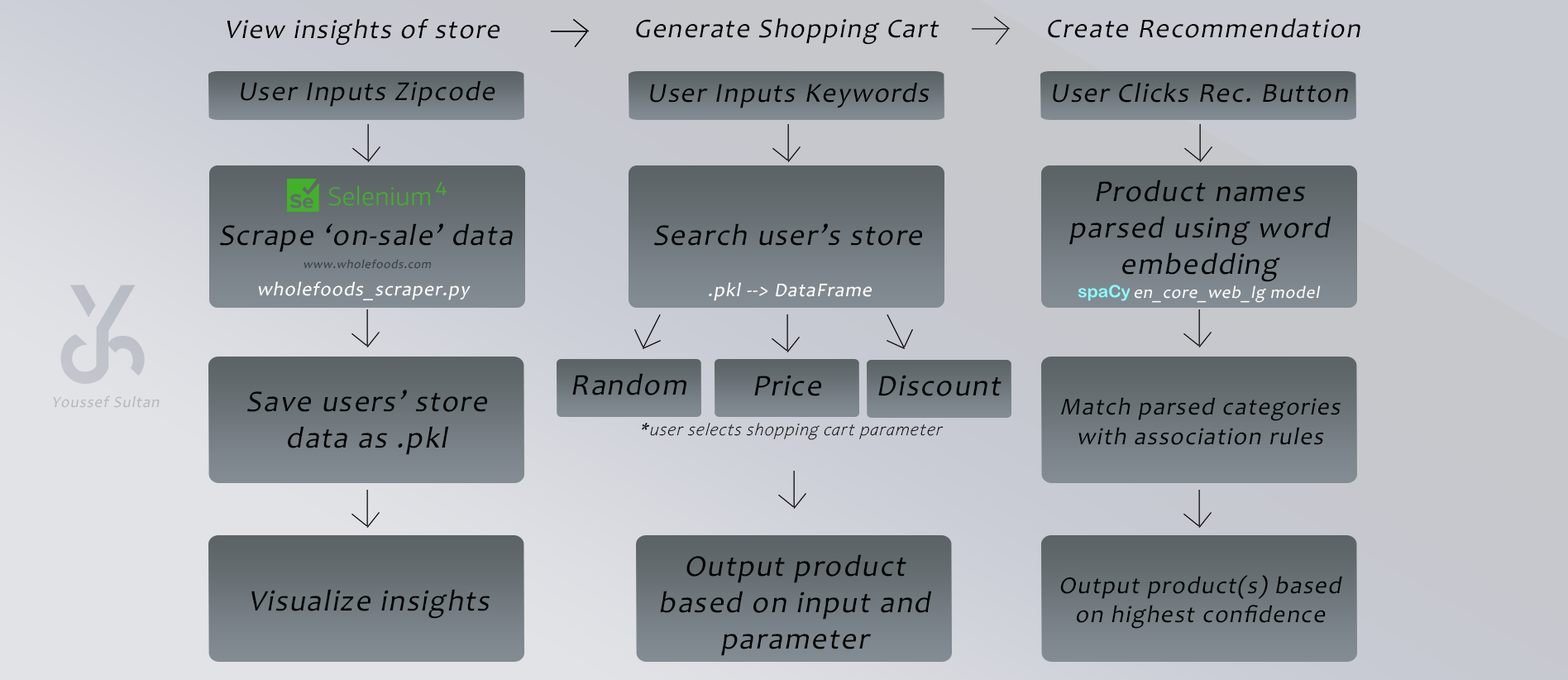
<style>
.page{position:relative;width:1568px;height:680px}
.page>*{position:absolute;margin:0}
.t1{font:27.2px "Candara";letter-spacing:0.05em;color:#000000;font-style:italic}
.t2{font:27.5px "Candara";letter-spacing:0.05em;color:#000000;font-style:italic}
.t3{font:30.4px "Candara";letter-spacing:0.05em;color:#000000;font-style:italic}
.t4{font:12.2px "Candara";letter-spacing:0.05em;color:#394147;font-style:italic}
.t5{font:19.4px "Candara";letter-spacing:0.05em;color:#ffffff;font-style:italic}
.t6{font:17.1px "Candara";letter-spacing:0.05em;color:#ffffff;font-style:italic}
.t7{font:15.8px "Candara";letter-spacing:0.05em;color:#b7b8bb;font-style:italic}
.t8{font:24.3px "Candara";letter-spacing:0.05em;color:#000000;font-style:italic}
.t9{font:17.5px "Candara-LightItalic";letter-spacing:0.05em;color:#000000;font-style:italic}
</style>
<div class="page">
<p class="t1" style="left:227px;top:18px;width:273px;height:27px">View insights of store</p>
<p class="t1" style="left:636px;top:18px;width:303px;height:27px">Generate Shopping Cart</p>
<p class="t1" style="left:1048px;top:18px;width:312px;height:20px">Create Recommendation</p>
<p class="t2" style="left:241px;top:81px;width:254px;height:26px">User Inputs Zipcode</p>
<p class="t2" style="left:650px;top:83px;width:280px;height:25px">User Inputs Keywords</p>
<p class="t2" style="left:1053px;top:83px;width:295px;height:20px">User Clicks Rec. Button</p>
<p class="t3" style="left:1069px;top:179px;width:262px;height:103px;text-align:center">Product names parsed using word embedding</p>
<p class="t3" style="left:220px;top:223px;width:293px;height:29px">Scrape ‘on-sale’ data</p>
<p class="t3" style="left:654px;top:223px;width:268px;height:23px">Search user’s store</p>
<p class="t4" style="left:304px;top:259px;width:128px;height:10px">www.wholefoods.com</p>
<p class="t5" style="left:258px;top:281px;width:213px;height:20px">wholefoods_scraper.py</p>
<p class="t5" style="left:709px;top:282px;width:163px;height:19px">.pkl --&gt; DataFrame</p>
<p class="t6" style="left:1134px;top:285px;width:187px;height:18px">en_core_web_lg model</p>
<p class="t3" style="left:572px;top:373px;width:114px;height:22px">Random</p>
<p class="t3" style="left:754px;top:375px;width:67px;height:21px">Price</p>
<p class="t3" style="left:878px;top:375px;width:124px;height:21px">Discount</p>
<p class="t3" style="left:247px;top:390px;width:240px;height:65px;text-align:center">Save users’ store data as .pkl</p>
<p class="t7" style="left:53px;top:395px;width:107px;height:13px">Youssef Sultan</p>
<p class="t8" style="left:1061px;top:397px;width:280px;height:48px;text-align:center">Match parsed categories with association rules</p>
<p class="t9" style="left:642px;top:423px;width:302px;height:17px">*user selects shopping cart parameter</p>
<p class="t3" style="left:660px;top:554px;width:272px;height:102px;text-align:center">Output product based on input and parameter</p>
<p class="t8" style="left:1060px;top:575px;width:282px;height:54px;text-align:center">Output product(s) based on highest confidence</p>
<p class="t3" style="left:251px;top:589px;width:239px;height:30px">Visualize insights</p>
</div>
